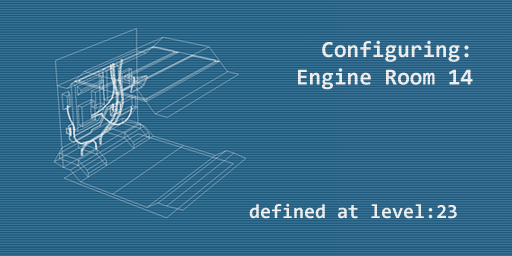
<style>
.page{position:relative;width:512px;height:256px}
.page>*{position:absolute;margin:0}
.t1{font:23px "Consolas-Bold";color:#ececec}
.t2{font:20px "Consolas-Bold";color:#ffffff}
</style>
<div class="page">
<p class="t1" style="left:298px;top:40px;width:175px;height:50px;text-align:right">Configuring:<br>Engine Room 14</p>
<p class="t2" style="left:249px;top:203px;width:208px;height:16px">defined at level:23</p>
</div>
